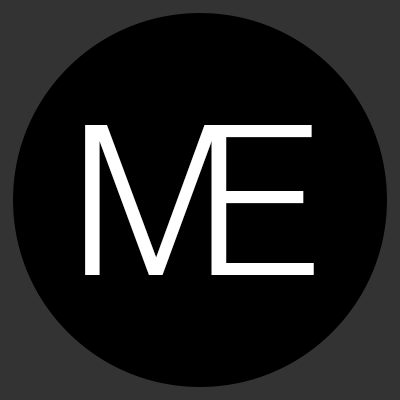
<style>
.page{position:relative;width:400px;height:400px;background:#000000}
.page>*{position:absolute;margin:0}
.t1{font:208.3px "Helvetica-Light";color:#ffffff;font-variant:small-caps}
</style>
<div class="page">
<p class="t1" style="left:85px;top:125px;width:142px;height:150px">M</p>
<p class="t1" style="left:211px;top:125px;width:103px;height:150px">E</p>
</div>
